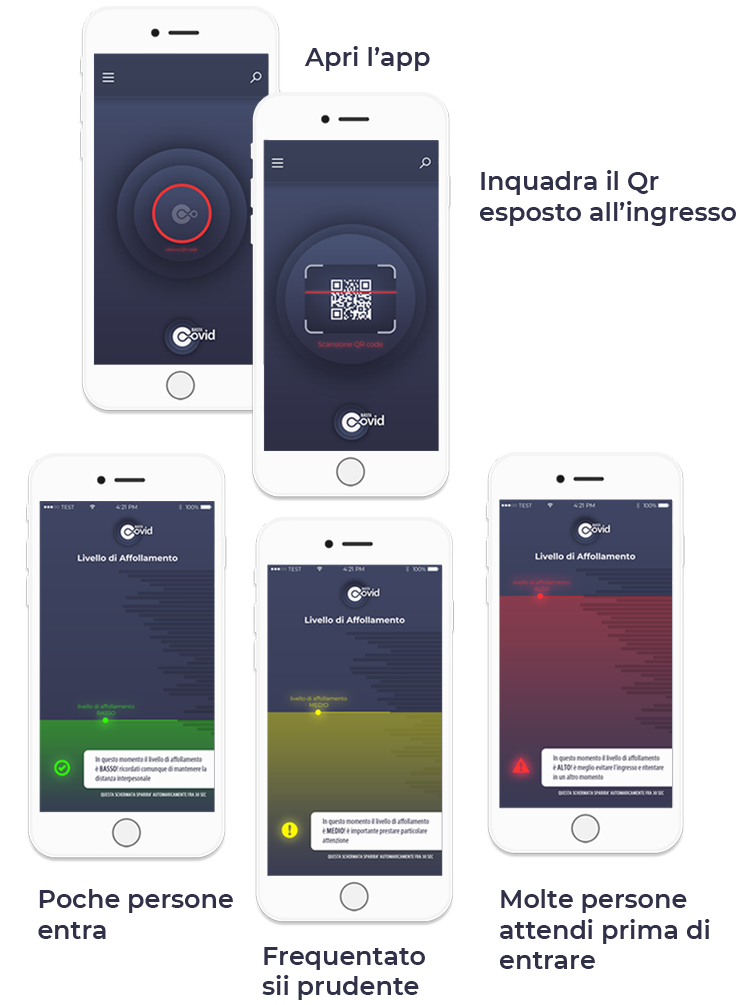
<style>
.page{position:relative;width:753px;height:1005px;background:#ffffff}
.page>*{position:absolute;margin:0}
.t1{font:25.4px "Montserrat-SemiBold";color:#303048}
</style>
<div class="page">
<p class="t1" style="left:304px;top:46px;width:126px;height:25px">Apri l’app</p>
<p class="t1" style="left:480px;top:170px;width:256px;height:56px">Inquadra il Qr<br>esposto all’ingresso</p>
<p class="t1" style="left:38px;top:889px;width:195px;height:50px">Poche persone<br>entra</p>
<p class="t1" style="left:500px;top:889px;width:210px;height:80px">Molte persone<br>attendi prima di <br>entrare</p>
<p class="t1" style="left:262px;top:947px;width:163px;height:53px">Frequentato<br>sii prudente</p>
</div>
